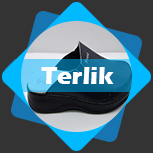
<style>
.page{position:relative;width:153px;height:153px;background:#333333}
.page>*{position:absolute;margin:0}
.t1{font:25px "ErasITC-Bold";color:#ffffff}
</style>
<div class="page">
<p class="t1" style="left:41px;top:67px;width:73px;height:17px">Terlik</p>
</div>
